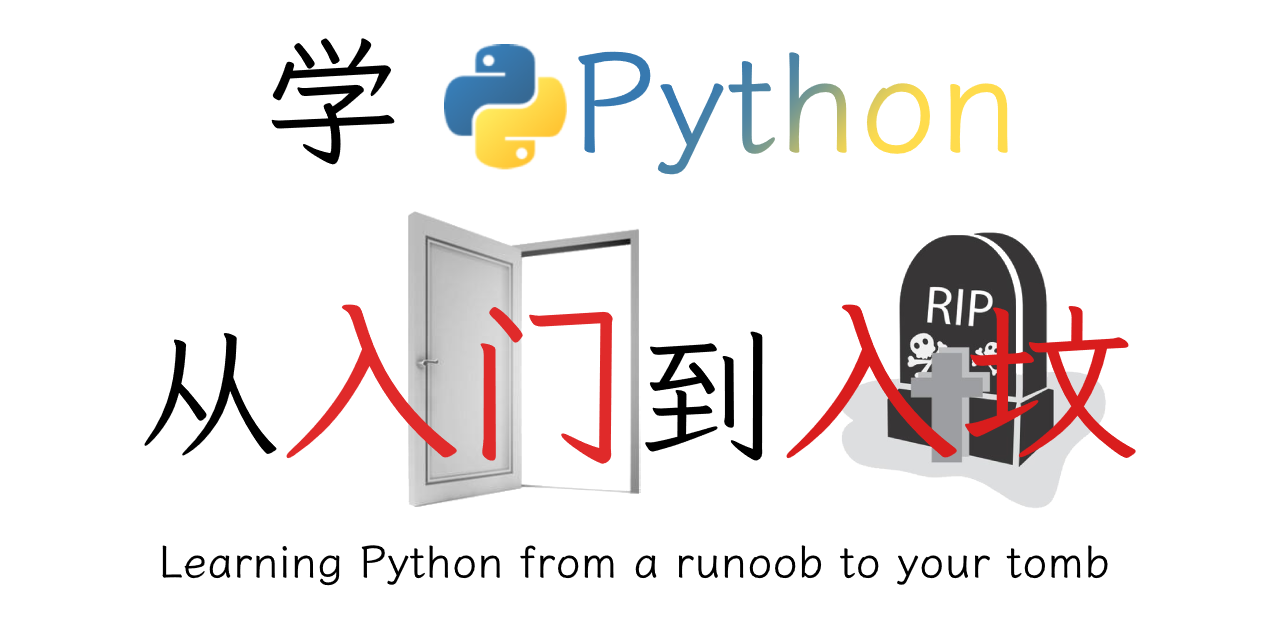
<style>
.page{position:relative;width:1280px;height:640px;background:#ffffff}
.page>*{position:absolute;margin:0}
.t1{font:140px "LXGWWenKai-Regular";color:#000000}
.t2{font:140px "LXGWWenKai-Regular"}
.t3{font:180px "LXGWWenKai-Regular";color:#e02a2a}
.t4{font:180px "LXGWWenKai-Regular";color:#d91d1d}
.t5{font:45px "LXGWWenKai-Regular";color:#000000}
</style>
<div class="page">
<p class="t1" style="left:271px;top:38px;width:124px;height:127px">学</p>
<p class="t2" style="left:578px;top:51px;width:430px;height:124px">Python</p>
<p class="t3" style="left:144px;top:304px;width:992px;height:160px"><span class="t1">从</span>入门<span class="t1">到</span><span class="t4">入坟</span></p>
<p class="t5" style="left:162px;top:545px;width:946px;height:41px">Learning Python from a runoob to your tomb</p>
</div>
